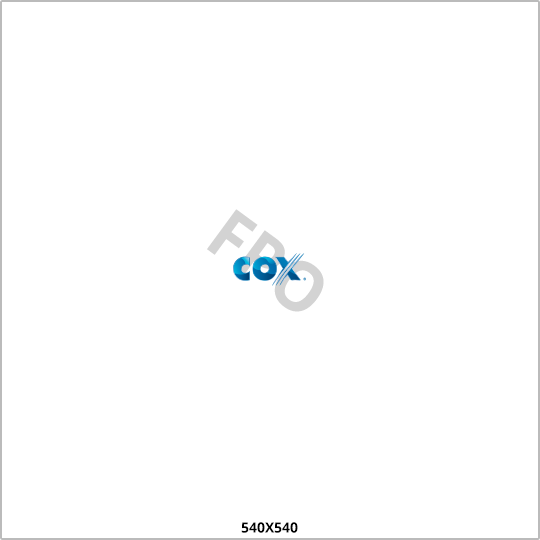
<style>
.page{position:relative;width:540px;height:540px;background:#ffffff}
.page>*{position:absolute;margin:0}
.t1{font:69.5px "OpenSans-Bold";color:#bebebe;text-transform:uppercase;scale:0.93 1}
.t2{font:14px "OpenSans-Bold";color:#000000;text-transform:uppercase}
</style>
<div class="page">
<p class="t1" style="left:207px;top:209px;width:117px;height:103px;rotate:36deg;opacity:0.7">FPO</p>
<p class="t2" style="left:241px;top:522px;width:57px;height:11px">540x540</p>
</div>
